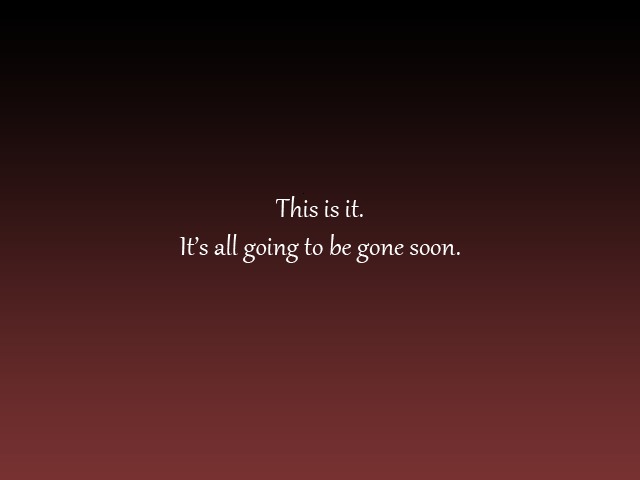
<style>
.page{position:relative;width:640px;height:480px}
.page>*{position:absolute;margin:0}
.t1{font:32px "Gabriola";color:#ffffff}
.t2{font:37.3px "Gabriola";color:#ffffff}
</style>
<div class="page">
<p class="t1" style="left:179px;top:196px;width:281px;height:67px;text-align:center"><span class="t2"><br></span><br><br><br><br>This is it.<br>It’s all going to be gone soon.</p>
</div>
